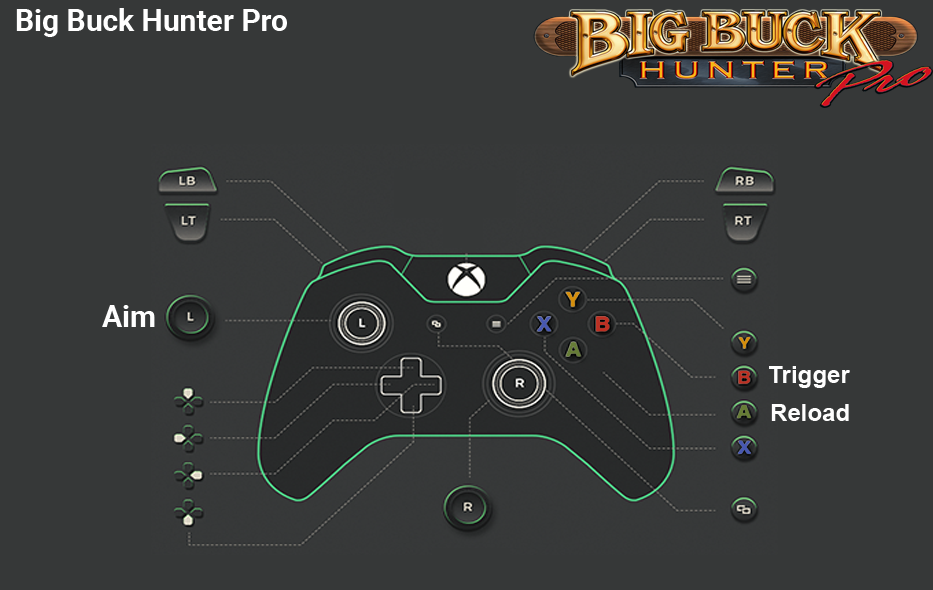
<style>
.page{position:relative;width:933px;height:590px;background:#363838}
.page>*{position:absolute;margin:0}
.t1{font:30px "Roboto-Bold";color:#ffffff}
.t2{font:30px "Roboto-Bold";color:#fefefe}
.t3{font:24px "Arial-BoldMT";color:#fefefe}
</style>
<div class="page">
<p class="t1" style="left:16px;top:8px;width:271px;height:29px">Big Buck Hunter Pro</p>
<p class="t2" style="left:102px;top:305px;width:53px;height:22px">Aim</p>
<p class="t3" style="left:769px;top:366px;width:81px;height:22px">Trigger</p>
<p class="t3" style="left:771px;top:404px;width:78px;height:17px">Reload</p>
</div>
